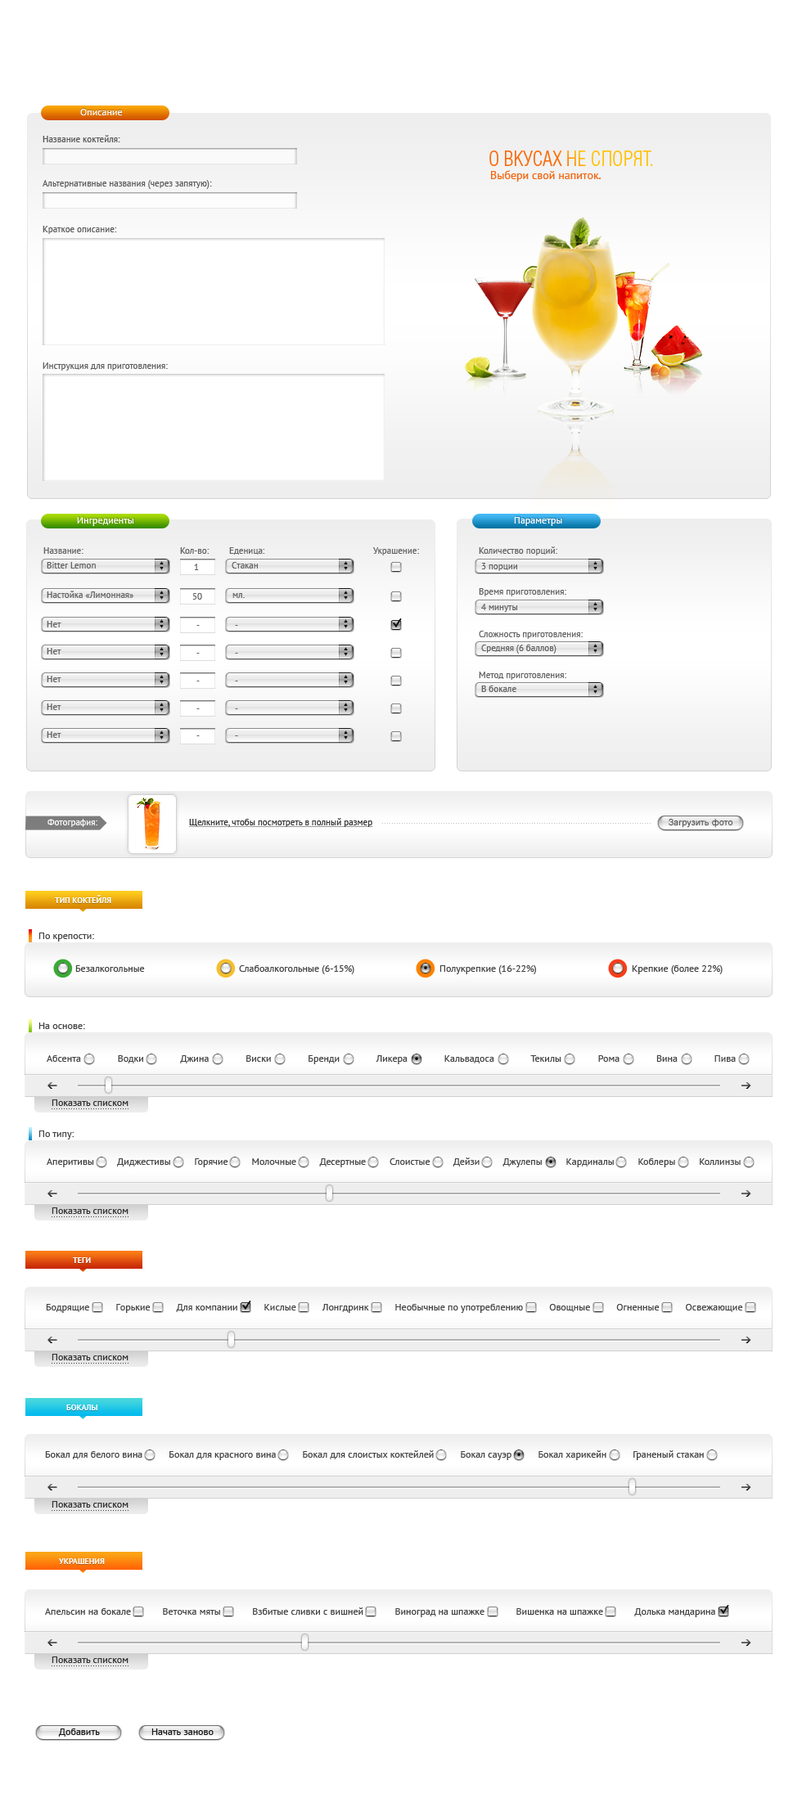
<style>
.page{position:relative;width:802px;height:1798px;background:#ffffff}
.page>*{position:absolute;margin:0}
.t1{font:9.8px "PTSans-Regular"}
.t2{font:9.8px "PTSans-Regular";color:#ffffff}
.t3{font:9px "PTSans-Regular";color:#585858}
.t4{font:19.6px "AGLettericaLightCondensedC"}
.t5{font:11.5px "PTSans-Regular";color:#f3640d}
.t6{font:9px "PTSans-Regular";color:#5a5a5a}
.t7{font:9px "PTSans-Regular";color:#5c5c5c}
.t8{font:9px "PTSans-Regular";color:#5d5d5d}
.t9{font:9px "PTSans-Regular";color:#626262}
.t10{font:9px "PTSans-Regular";color:#ffffff}
.t11{font:9px "PTSans-Regular";color:#333333;text-decoration:underline}
.t12{font:9px "ArialMT";color:#535353}
.t13{font:8.2px "PTSans-Bold"}
.t14{font:8.2px "PTSans-Bold";color:#ffffff}
.t15{font:9.8px "PTSans-Regular";color:#434343}
.t16{font:9.8px "PTSans-Regular";color:#313131}
.t17{font:9.8px "PTSans-Regular";color:#1b1b1b}
</style>
<div class="page">
<p class="t1" style="left:80px;top:108px;width:43px;height:7px">Описание</p>
<p class="t2" style="left:80px;top:109px;width:43px;height:6px">Описание</p>
<p class="t3" style="left:43px;top:135px;width:77px;height:7px">Название коктейля:</p>
<p class="t4" style="left:489px;top:151px;width:164px;height:15px">О ВКУСАХ НЕ СПОРЯТ.</p>
<p class="t5" style="left:491px;top:170px;width:110px;height:12px">Выбери свой напиток.</p>
<p class="t6" style="left:43px;top:180px;width:169px;height:9px">Альтернативные названия (через запятую):</p>
<p class="t7" style="left:43px;top:226px;width:74px;height:8px">Краткое описание:</p>
<p class="t8" style="left:43px;top:362px;width:125px;height:9px">Инструкция для приготовления:</p>
<p class="t2" style="left:77px;top:517px;width:57px;height:9px">Ингредиенты</p>
<p class="t2" style="left:514px;top:517px;width:48px;height:9px">Параметры</p>
<p class="t1" style="left:515px;top:516px;width:48px;height:9px">Параметры</p>
<p class="t9" style="left:43px;top:547px;width:40px;height:7px">Название:</p>
<p class="t9" style="left:180px;top:547px;width:29px;height:7px">Кол-во:</p>
<p class="t9" style="left:229px;top:547px;width:36px;height:8px">Еденица:</p>
<p class="t9" style="left:372px;top:547px;width:47px;height:9px">Украшение:</p>
<p class="t9" style="left:479px;top:547px;width:78px;height:9px">Количество порций:</p>
<p class="t9" style="left:47px;top:562px;width:49px;height:7px">Bitter Lemon</p>
<p class="t9" style="left:194px;top:564px;width:5px;height:6px">1</p>
<p class="t9" style="left:232px;top:562px;width:26px;height:7px">Стакан</p>
<p class="t9" style="left:481px;top:563px;width:36px;height:8px">3 порции</p>
<p class="t9" style="left:47px;top:591px;width:86px;height:7px">Настойка «Лимонная»</p>
<p class="t9" style="left:192px;top:593px;width:10px;height:7px">50</p>
<p class="t9" style="left:232px;top:593px;width:13px;height:5px">мл.</p>
<p class="t9" style="left:479px;top:588px;width:87px;height:8px">Время приготовления:</p>
<p class="t9" style="left:481px;top:604px;width:36px;height:8px">4 минуты</p>
<p class="t9" style="left:479px;top:631px;width:104px;height:8px">Сложность приготовления:</p>
<p class="t9" style="left:481px;top:645px;width:75px;height:9px">Средняя (6 баллов)</p>
<p class="t9" style="left:479px;top:672px;width:87px;height:8px">Метод приготовления:</p>
<p class="t9" style="left:481px;top:686px;width:35px;height:6px">В бокале</p>
<p class="t10" style="left:47px;top:819px;width:50px;height:8px">Фотография:</p>
<p class="t11" style="left:189px;top:818px;width:184px;height:9px">Щелкните, чтобы посмотреть в полный размер</p>
<p class="t12" style="left:668px;top:819px;width:64px;height:9px">Загрузить фото</p>
<p class="t13" style="left:55px;top:896px;width:56px;height:8px">ТИП КОКТЕЙЛЯ</p>
<p class="t14" style="left:55px;top:895px;width:56px;height:8px">ТИП КОКТЕЙЛЯ</p>
<p class="t15" style="left:38px;top:933px;width:56px;height:9px">По крепости:</p>
<p class="t15" style="left:75px;top:965px;width:70px;height:7px">Безалкогольные</p>
<p class="t15" style="left:239px;top:965px;width:115px;height:9px">Слабоалкогольные (6-15%)</p>
<p class="t15" style="left:439px;top:965px;width:97px;height:9px">Полукрепкие (16-22%)</p>
<p class="t15" style="left:632px;top:965px;width:90px;height:9px">Крепкие (более 22%)</p>
<p class="t15" style="left:38px;top:1023px;width:47px;height:6px">На основе:</p>
<p class="t15" style="left:47px;top:1055px;width:689px;height:9px">Абсента              Водки              Джина              Виски              Бренди              Ликера              Кальвадоса              Текилы              Рома              Вина              Пива</p>
<p class="t16" style="left:52px;top:1100px;width:76px;height:6px">Показать списком</p>
<p class="t15" style="left:38px;top:1131px;width:36px;height:9px">По типу:</p>
<p class="t15" style="left:47px;top:1158px;width:693px;height:10px">Аперитивы         Диджестивы         Горячие         Молочные         Десертные         Слоистые         Дейзи         Джулепы         Кардиналы         Коблеры         Коллинзы</p>
<p class="t16" style="left:52px;top:1208px;width:76px;height:6px">Показать списком</p>
<p class="t13" style="left:73px;top:1258px;width:18px;height:6px">ТЕГИ</p>
<p class="t14" style="left:73px;top:1258px;width:18px;height:5px">ТЕГИ</p>
<p class="t15" style="left:46px;top:1304px;width:697px;height:9px">Бодрящие          Горькие          Для компании          Кислые          Лонгдринк          Необычные по употреблению          Овощные          Огненные          Освежающие</p>
<p class="t16" style="left:52px;top:1354px;width:76px;height:7px">Показать списком</p>
<p class="t13" style="left:66px;top:1406px;width:31px;height:5px">БОКАЛЫ</p>
<p class="t14" style="left:66px;top:1405px;width:31px;height:6px">БОКАЛЫ</p>
<p class="t15" style="left:45px;top:1451px;width:659px;height:9px">Бокал для белого вина          Бокал для красного вина          Бокал для слоистых коктейлей          Бокал сауэр          Бокал харикейн          Граненый стакан</p>
<p class="t16" style="left:52px;top:1501px;width:76px;height:7px">Показать списком</p>
<p class="t13" style="left:58px;top:1559px;width:47px;height:6px">УКРАШЕНИЯ</p>
<p class="t14" style="left:58px;top:1559px;width:47px;height:5px">УКРАШЕНИЯ</p>
<p class="t15" style="left:45px;top:1608px;width:670px;height:10px">Апельсин на бокале            Веточка мяты            Взбитые сливки с вишней            Виноград на шпажке            Вишенка на шпажке            Долька мандарина</p>
<p class="t16" style="left:52px;top:1657px;width:76px;height:6px">Показать списком</p>
<p class="t17" style="left:58px;top:1729px;width:42px;height:8px">Добавить</p>
<p class="t17" style="left:151px;top:1729px;width:63px;height:6px">Начать заново</p>
</div>
